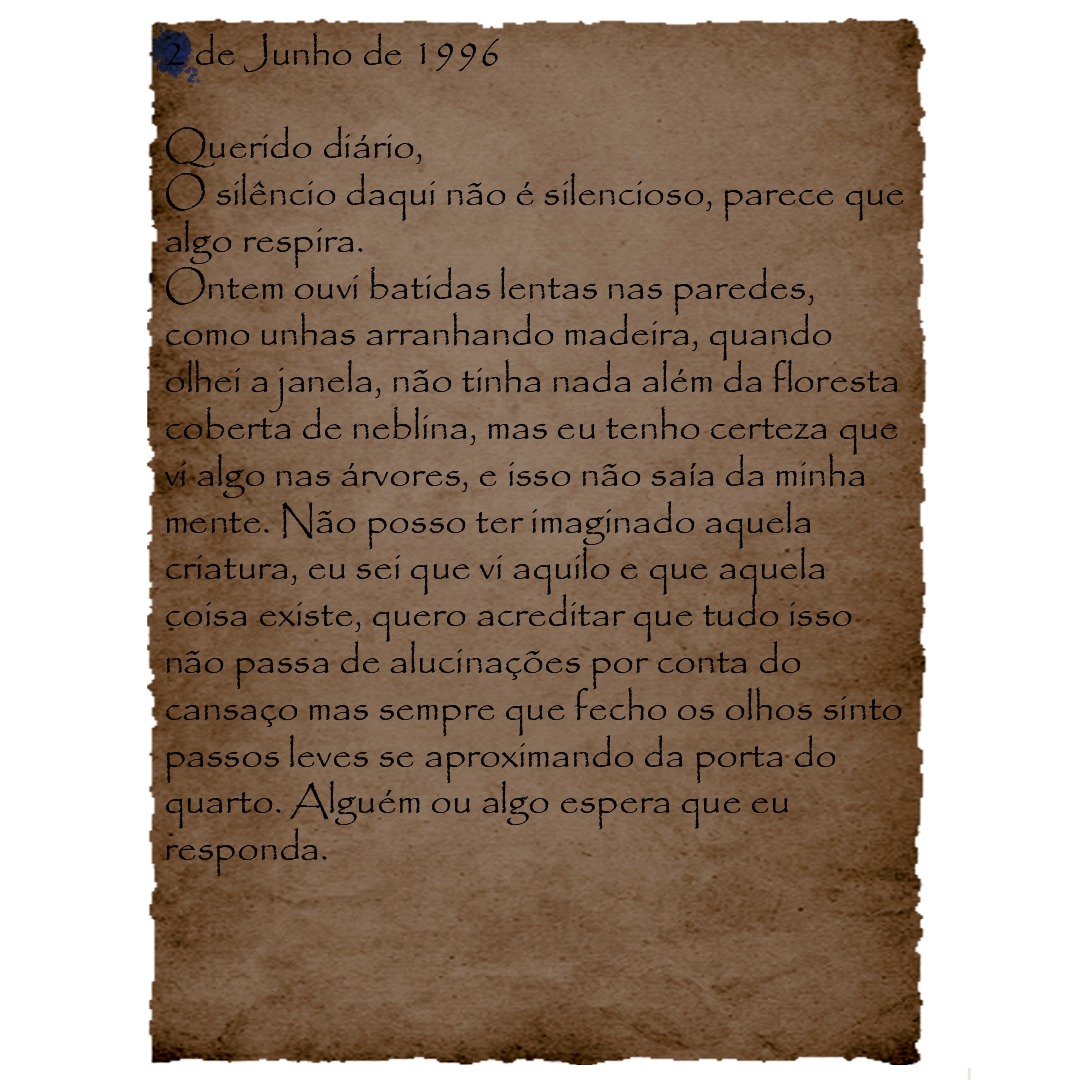
<style>
.page{position:relative;width:1080px;height:1080px;background:#ffffff}
.page>*{position:absolute;margin:0}
.t1{font:39px "Papyrus-Regular";color:#000000}
</style>
<div class="page">
<p class="t1" style="left:164px;top:32px;width:740px;height:845px">2 de Junho de 1996<br><br>Querido diário,<br>O silêncio daqui não é silencioso, parece que algo respira.<br>Ontem ouvi batidas lentas nas paredes, como unhas arranhando madeira, quando olhei a janela, não tinha nada além da floresta coberta de neblina, mas eu tenho certeza que vi algo nas árvores, e isso não saía da minha mente. Não posso ter imaginado aquela criatura, eu sei que vi aquilo e que aquela coisa existe, quero acreditar que tudo isso não passa de alucinações por conta do cansaço mas sempre que fecho os olhos sinto passos leves se aproximando da porta do quarto. Alguém ou algo espera que eu<br>responda.</p>
</div>
